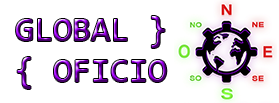
<style>
.page{position:relative;width:279px;height:103px;background:#ffffff}
.page>*{position:absolute;margin:0}
.t1{font:34.5px "Consolas"}
</style>
<div class="page">
<p class="t1" style="left:16px;top:16px;width:151px;height:73px">GLOBAL }<br>{ OFICIO</p>
</div>
